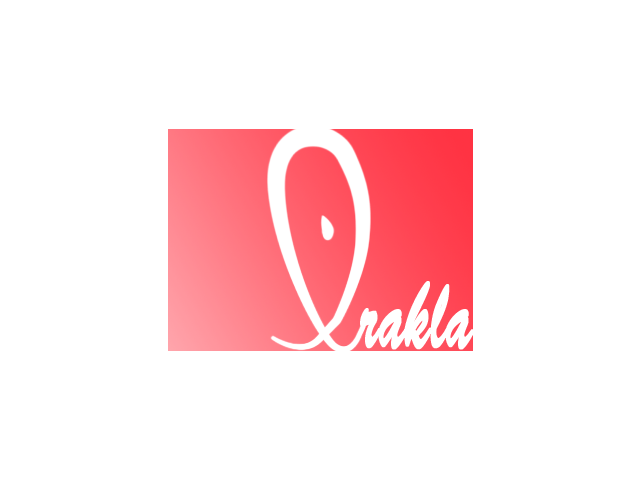
<style>
.page{position:relative;width:640px;height:480px;background:#ffffff}
.page>*{position:absolute;margin:0}
.t1{font:100px "BrushScriptStd";color:#ffffff;font-weight:bold;scale:0.5 1}
</style>
<div class="page">
<p class="t1" style="left:358px;top:281px;width:116px;height:69px">rakla</p>
</div>
